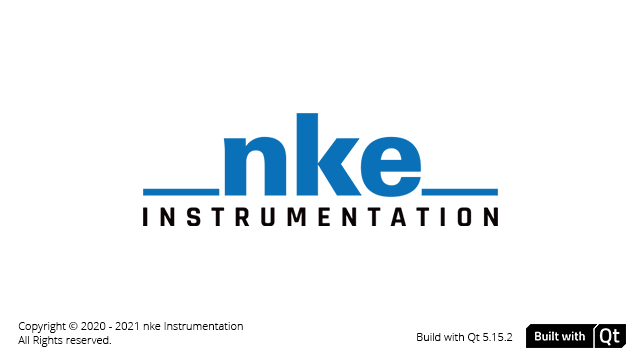
<style>
.page{position:relative;width:640px;height:360px;background:#ffffff}
.page>*{position:absolute;margin:0}
.t1{font:11px "OpenSans-Light";color:#000000}
</style>
<div class="page">
<p class="t1" style="left:18px;top:322px;width:225px;height:25px">Copyright © 2020 - 2021 nke Instrumentation<br>All Rights reserved.</p>
<p class="t1" style="left:417px;top:333px;width:96px;height:10px">Build with Qt 5.15.2</p>
</div>
